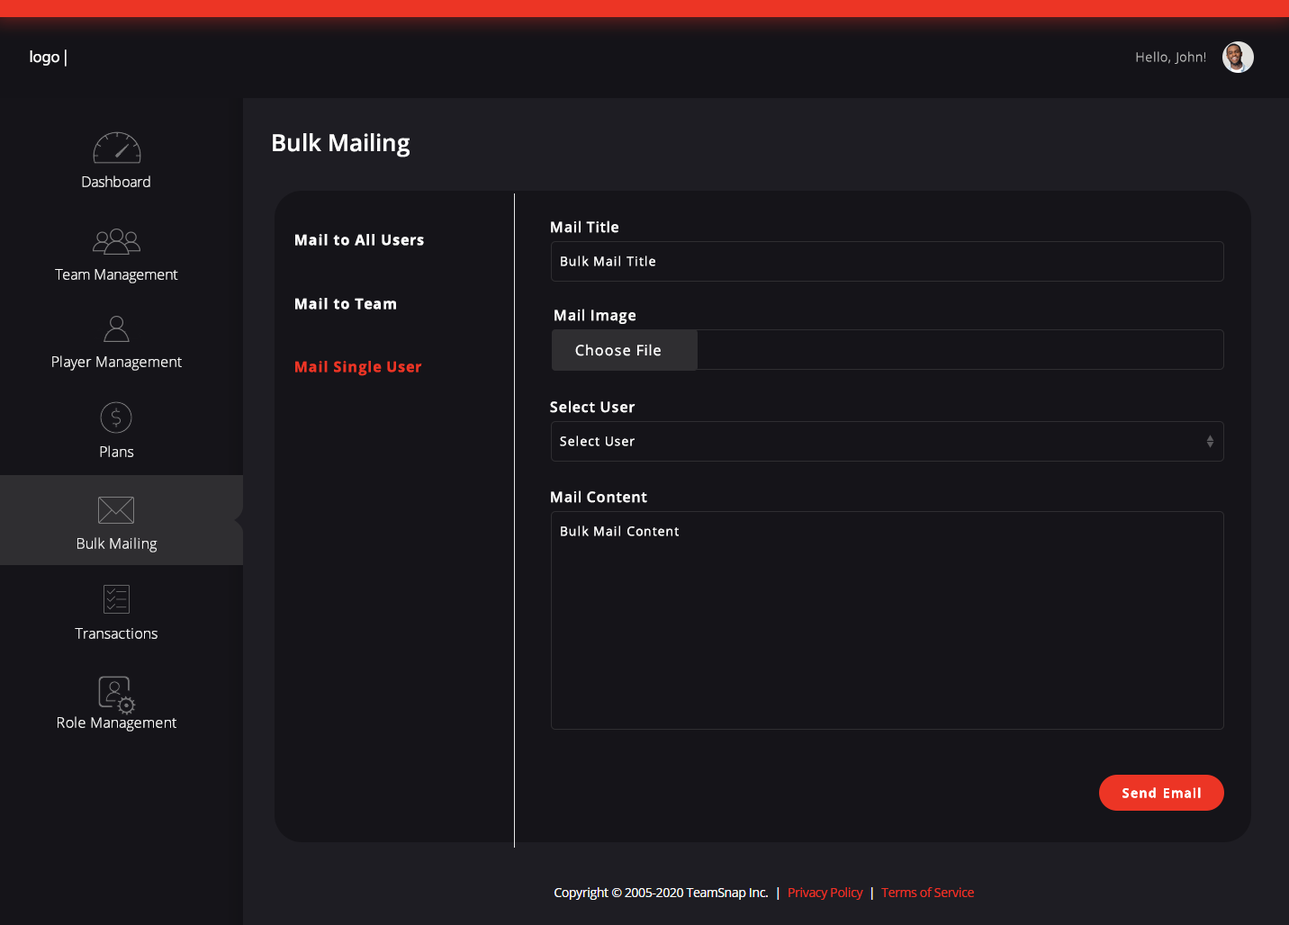
<style>
.page{position:relative;width:1289px;height:925px;background:#151419}
.page>*{position:absolute;margin:0}
.t1{font:16.2px "MyriadPro-Regular";color:#ffffff}
.t2{font:12.6px "OpenSans-Light";letter-spacing:0.06em;color:#bbbbbb}
.t3{font:23.4px "OpenSans-Semibold";color:#ffffff}
.t4{font:14.4px "OpenSans-Light";color:#f6f6f6}
.t5{font:14.4px "OpenSans-Semibold";letter-spacing:0.06em;color:#ffffff}
.t6{font:14.4px "OpenSans-Bold";letter-spacing:0.06em;color:#fefefe}
.t7{font:12.6px "OpenSans";letter-spacing:0.06em;color:#ffffff}
.t8{font:14.4px "OpenSans-Bold";letter-spacing:0.06em;color:#ffffff}
.t9{font:14.4px "OpenSans";letter-spacing:0.06em;color:#ffffff}
.t10{font:14.4px "OpenSans-Light";letter-spacing:0.02em;color:#f6f6f6}
.t11{font:14.4px "OpenSans-Bold";letter-spacing:0.06em;color:#ec3525}
.t12{font:12.6px "OpenSans-Semibold";letter-spacing:0.1em;color:#ffffff}
</style>
<div class="page">
<p class="t1" style="left:30px;top:50px;width:37px;height:17px">logo |</p>
<p class="t2" style="left:1136px;top:51px;width:70px;height:13px">Hello, John!</p>
<p class="t3" style="left:273px;top:133px;width:137px;height:25px">Bulk Mailing</p>
<p class="t4" style="left:82px;top:176px;width:68px;height:11px">Dashboard</p>
<p class="t5" style="left:551px;top:221px;width:67px;height:12px">Mail Title</p>
<p class="t6" style="left:295px;top:234px;width:129px;height:12px">Mail to All Users</p>
<p class="t7" style="left:561px;top:256px;width:94px;height:10px">Bulk Mail Title</p>
<p class="t4" style="left:55px;top:269px;width:123px;height:15px">Team Management</p>
<p class="t8" style="left:295px;top:298px;width:101px;height:12px">Mail to Team</p>
<p class="t5" style="left:554px;top:309px;width:81px;height:15px">Mail Image</p>
<p class="t9" style="left:575px;top:344px;width:86px;height:12px">Choose File</p>
<p class="t10" style="left:52px;top:356px;width:130px;height:15px">Player Management</p>
<p class="t11" style="left:295px;top:361px;width:127px;height:15px">Mail Single User</p>
<p class="t5" style="left:550px;top:401px;width:85px;height:12px">Select User</p>
<p class="t7" style="left:560px;top:436px;width:75px;height:10px">Select User</p>
<p class="t10" style="left:100px;top:446px;width:34px;height:11px">Plans</p>
<p class="t5" style="left:551px;top:491px;width:96px;height:12px">Mail Content</p>
<p class="t7" style="left:561px;top:526px;width:118px;height:10px">Bulk Mail Content</p>
<p class="t10" style="left:77px;top:537px;width:81px;height:16px">Bulk Mailing</p>
<p class="t10" style="left:75px;top:628px;width:83px;height:11px">Transactions</p>
<p class="t10" style="left:58px;top:716px;width:118px;height:16px">Role Management</p>
<p class="t12" style="left:1122px;top:788px;width:79px;height:10px">Send Email</p>
<p class="t12" style="left:1122px;top:788px;width:79px;height:10px">Send Email</p>
</div>
